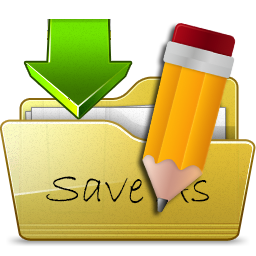
<style>
.page{position:relative;width:256px;height:256px;background:#ffffff}
.page>*{position:absolute;margin:0}
.t1{font:48px "BradleyHandITC";color:#000000}
</style>
<div class="page">
<p class="t1" style="left:46px;top:174px;width:164px;height:30px">Save As</p>
</div>
